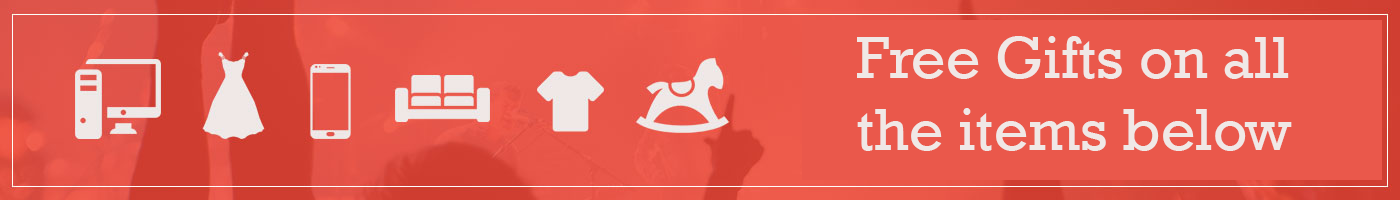
<style>
.page{position:relative;width:1400px;height:200px;background:#ea584b}
.page>*{position:absolute;margin:0}
.t1{font:60px "Rockwell";color:#f0e8e6}
</style>
<div class="page">
<p class="t1" style="left:857px;top:36px;width:435px;height:115px">Free Gifts on all<br>the items below</p>
</div>
